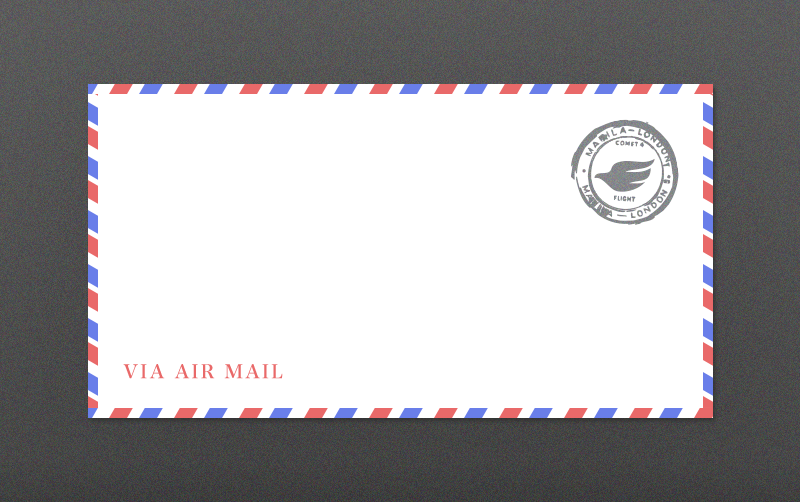
<style>
.page{position:relative;width:800px;height:502px;background:#ffffff}
.page>*{position:absolute;margin:0}
.t1{font:19px "HiraMinPro-W6";letter-spacing:0.1em;color:#e96969}
</style>
<div class="page">
<p class="t1" style="left:123px;top:364px;width:160px;height:15px">VIA AIR MAIL</p>
</div>
